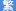
<style>
.page{position:relative;width:16px;height:11px;background:#4989db}
.page>*{position:absolute;margin:0}
.t1{font:12px "MicrosoftJhengHeiRegular";color:#ffffff}
</style>
<div class="page">
<p class="t1" style="left:2px;top:0px;width:12px;height:11px">繁</p>
</div>
